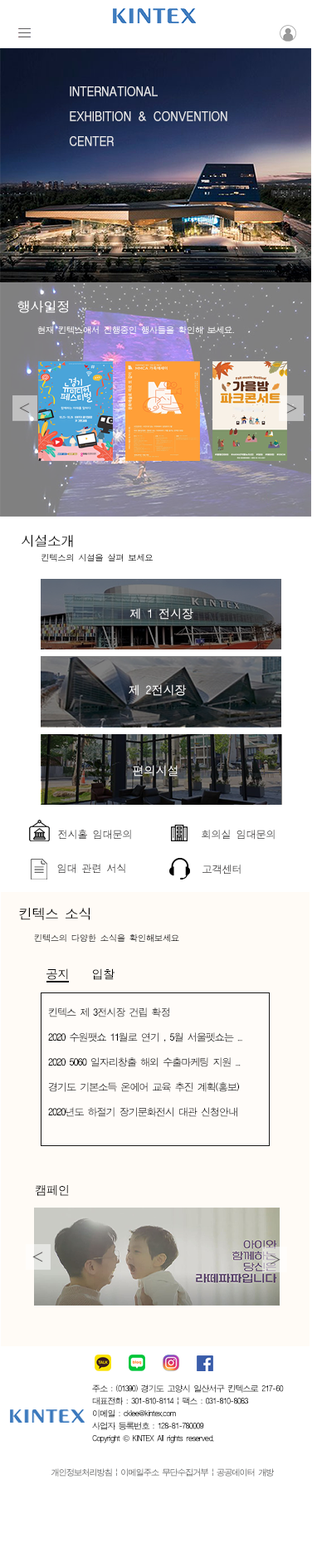
<style>
.page{position:relative;width:317px;height:1568px;background:#ffffff}
.page>*{position:absolute;margin:0}
.t1{font:13.3px/24.9px "ÈÞ¸Õ°íµñ";color:#eaebed}
.t2{font:13.3px "ÈÞ¸Õ°íµñ";color:#ffffff}
.t3{font:8.3px "ÈÞ¸Õ°íµñ";color:#ffffff}
.t4{font:13.3px "ÈÞ¸Õ°íµñ";color:#090909}
.t5{font:8.3px "ÈÞ¸Õ°íµñ";color:#000000}
.t6{font:10px "ÈÞ¸Õ°íµñ"}
.t7{font:10px "ÈÞ¸Õ°íµñ";color:#181717}
.t8{font:13.3px "ÈÞ¸Õ°íµñ";color:#010101}
.t9{font:8.3px "ÈÞ¸Õ°íµñ";color:#010101}
.t10{font:11.6px "ÈÞ¸Õ°íµñ";color:#010101}
.t11{font:10px/24.9px "ÈÞ¸Õ°íµñ";letter-spacing:-0.08em;color:#000000}
.t12{font:8.3px/12.5px "ÈÞ¸Õ°íµñ";letter-spacing:-0.08em;color:#020202}
.t13{font:8.3px/12.5px "Gulim";letter-spacing:-0.08em;color:#020202}
.t14{font:8.3px "ÈÞ¸Õ°íµñ";letter-spacing:-0.08em}
</style>
<div class="page">
<p class="t1" style="left:70px;top:86px;width:158px;height:60px">INTERNATIONAL <br>EXHIBITION &amp; CONVENTION <br>CENTER</p>
<p class="t2" style="left:17px;top:301px;width:52px;height:12px">행사일정</p>
<p class="t3" style="left:37px;top:326px;width:197px;height:9px">현재 킨텍스에서 진행중인 행사들을 확인해 보세요.</p>
<p class="t4" style="left:22px;top:535px;width:51px;height:12px">시설소개</p>
<p class="t5" style="left:42px;top:553px;width:111px;height:9px">킨텍스의 시설을 살펴 보세요</p>
<p class="t6" style="left:58px;top:830px;width:73px;height:10px">전시홀 임대문의</p>
<p class="t6" style="left:202px;top:830px;width:73px;height:10px">회의실 임대문의</p>
<p class="t7" style="left:57px;top:864px;width:68px;height:10px">임대 관련 서식</p>
<p class="t6" style="left:203px;top:865px;width:38px;height:10px">고객센터</p>
<p class="t8" style="left:19px;top:908px;width:72px;height:12px">킨텍스 소식</p>
<p class="t9" style="left:34px;top:933px;width:145px;height:10px">킨텍스의 다양한 소식을 확인해보세요</p>
<p class="t10" style="left:47px;top:968px;width:21px;height:12px">공지</p>
<p class="t10" style="left:93px;top:968px;width:22px;height:12px">입찰</p>
<p class="t11" style="left:48px;top:1007px;width:195px;height:110px">킨텍스 제 3전시장 건립 확정<br>2020 수원팻쇼 11월로 연기 , 5월 서울펫쇼는 ...<br>2020 5060 일자리창출 해외 수출마케팅 지원 ...<br>경기도 기본소득 온에어 교육 추진 계획(홍보)<br>2020년도 하절기 장기문화전시 대관 신청안내</p>
<p class="t10" style="left:35px;top:1184px;width:34px;height:12px">캠페인</p>
<p class="t12" style="left:92px;top:1384px;width:192px;height:59px">주소 : (01390) 경기도 고양시 일산서구 킨텍스로 217-60<br>대표전화 : 301-810-8114 | 팩스 : 031-810-8083<br>이메일 : cklee@kintex.com <br>사업자 등록번호 : 128-81-780009<br>Copyright <span class="t13">©</span> KINTEX All rights reserved.</p>
<p class="t14" style="left:51px;top:1468px;width:223px;height:9px">개인정보처리방침 | 이메일주소 무단수집거부 | 공공데이터 개방</p>
</div>
